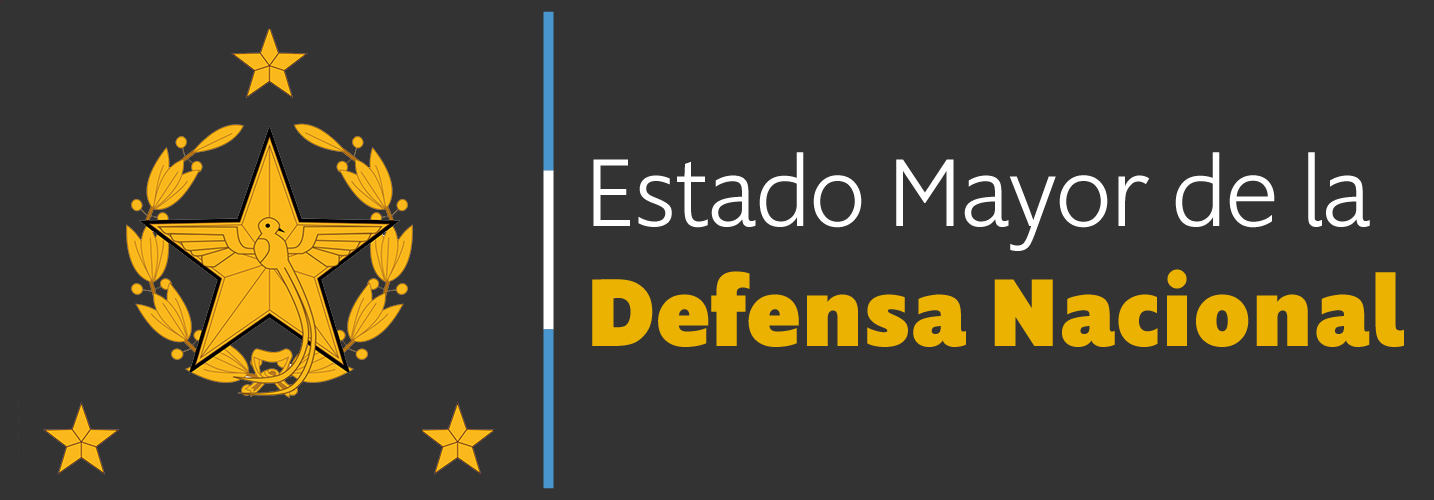
<style>
.page{position:relative;width:1434px;height:500px;background:#333333}
.page>*{position:absolute;margin:0}
.t1{font:100px "Supra-LightMezzo";color:#ffffff}
.t2{font:100px "Supra-BlackMezzo";color:#ecb201}
</style>
<div class="page">
<p class="t1" style="left:592px;top:152px;width:812px;height:195px">Estado Mayor de la <br><span class="t2">Defensa Nacional</span></p>
</div>
